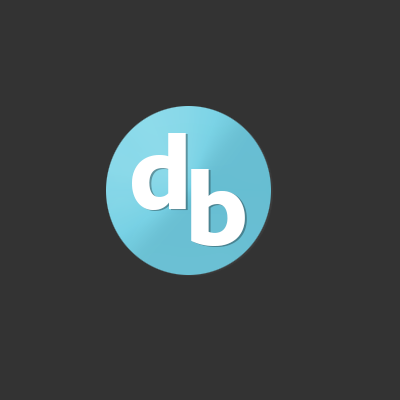
<style>
.page{position:relative;width:400px;height:400px;background:#333333}
.page>*{position:absolute;margin:0}
.t1{font:108px "Seravek-Bold";color:#fefefe}
.t2{font:108px "Seravek-Bold";color:#ffffff}
</style>
<div class="page">
<p class="t1" style="left:132px;top:133px;width:54px;height:77px">d</p>
<p class="t2" style="left:191px;top:169px;width:54px;height:77px">b</p>
</div>
